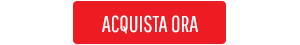
<style>
.page{position:relative;width:300px;height:45px;background:#ffffff}
.page>*{position:absolute;margin:0}
.t1{font:23px "PathwayGothicOne-Book";color:#ffffff;text-transform:uppercase}
</style>
<div class="page">
<p class="t1" style="left:102px;top:15px;width:96px;height:19px">Acquista ora</p>
</div>
